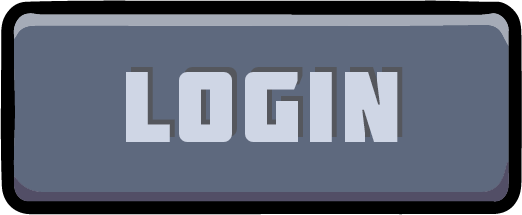
<style>
.page{position:relative;width:522px;height:215px;background:#5e697e}
.page>*{position:absolute;margin:0}
.t1{font:100px "Molot";letter-spacing:0.05em;color:#cfd6e5}
</style>
<div class="page">
<p class="t1" style="left:126px;top:72px;width:272px;height:70px">LogIN</p>
<p class="t1" style="left:131px;top:67px;width:272px;height:70px">LogIN</p>
</div>
